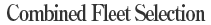
<style>
.page{position:relative;width:211px;height:25px;background:#ffffff}
.page>*{position:absolute;margin:0}
.t1{font:22px "RyuminPro-ExBold";letter-spacing:-0.08em;color:#333333;scale:0.9 1}
</style>
<div class="page">
<p class="t1" style="left:7px;top:4px;width:199px;height:17px">Combined Fleet Selection</p>
</div>
